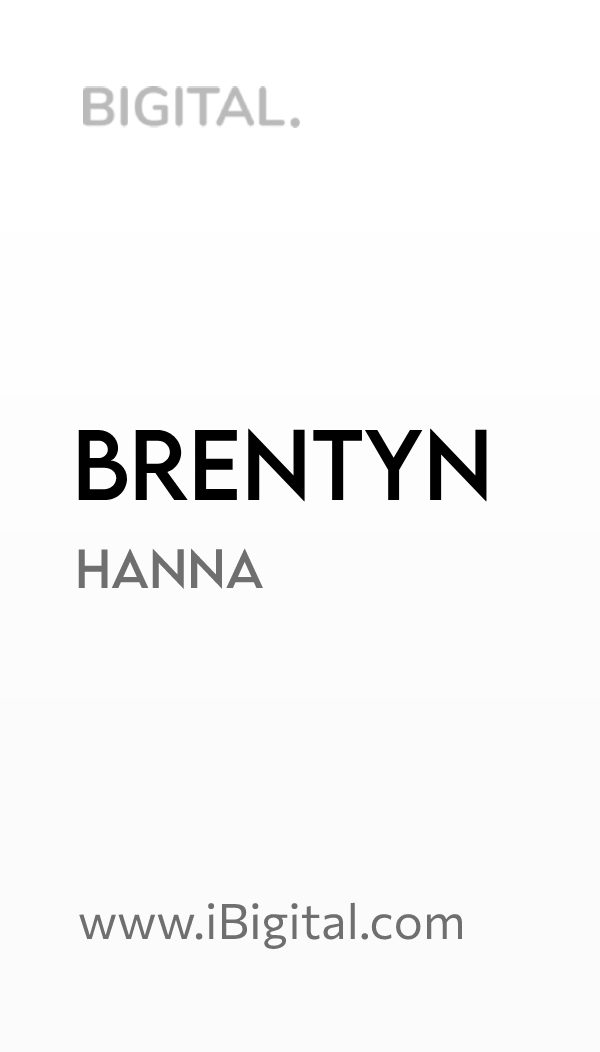
<style>
.page{position:relative;width:600px;height:1052px;background:#fbfbfb}
.page>*{position:absolute;margin:0}
.t1{font:89px "LEMONMILK-Regular";color:#000000}
.t2{font:49px "LEMONMILK-Regular";color:#6f6f6f}
.t3{font:49px "Commissioner-Regular";color:#6f6f6f}
</style>
<div class="page">
<p class="t1" style="left:78px;top:428px;width:409px;height:74px">Brentyn</p>
<p class="t2" style="left:78px;top:548px;width:185px;height:41px">Hanna</p>
<p class="t3" style="left:79px;top:902px;width:384px;height:47px">www.iBigital.com</p>
</div>
